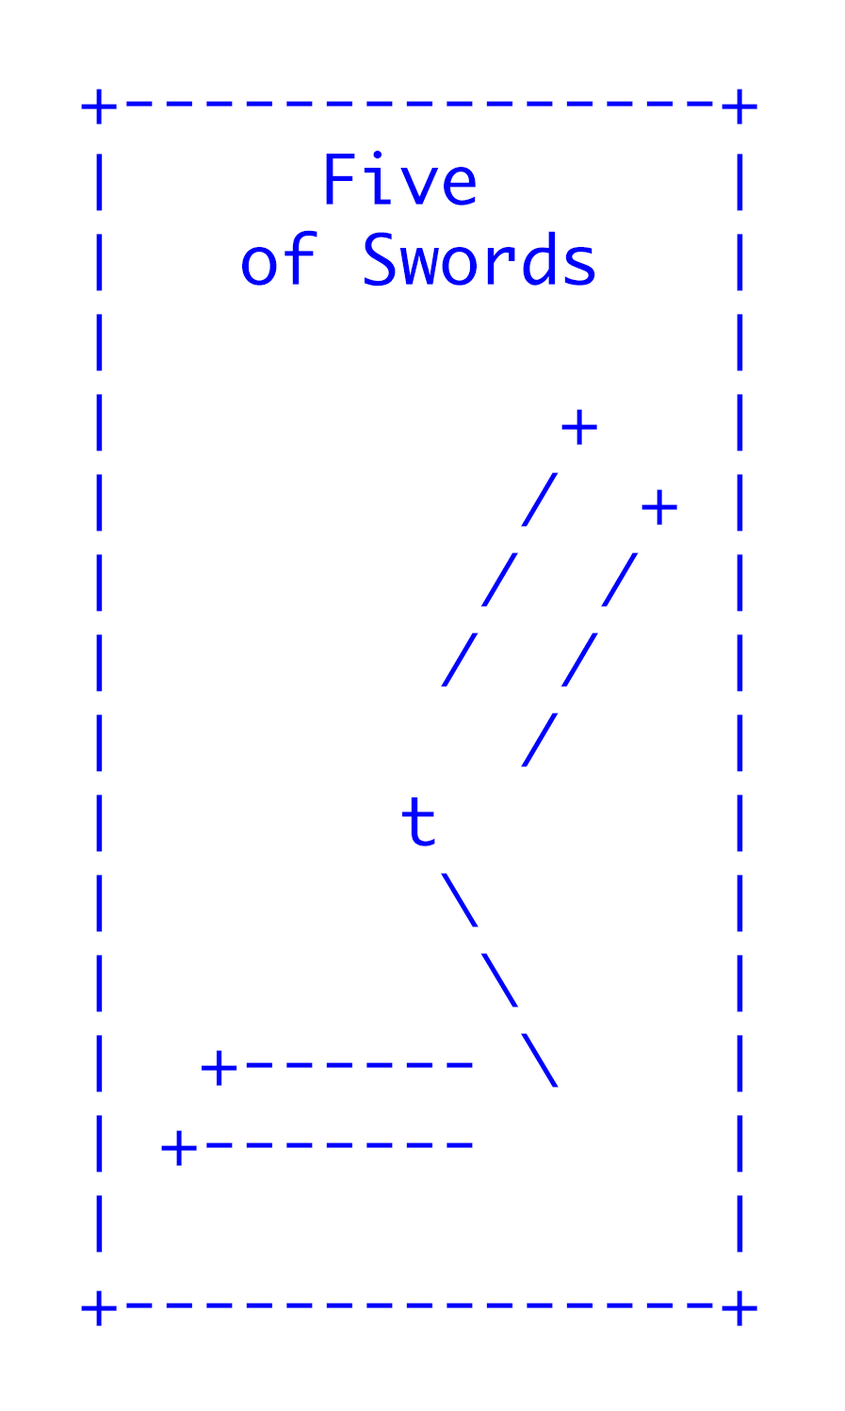
<style>
.page{position:relative;width:845px;height:1411px;background:#ffffff}
.page>*{position:absolute;margin:0}
.t1{font:66.7px "Monaco";color:#0000ff}
</style>
<div class="page">
<p class="t1" style="left:81px;top:89px;width:677px;height:1237px">+---------------+<br>│     Five      │<br>│   of Swords   │<br>│               │<br>│           +   │<br>│          /  + │<br>│         /  /  │<br>│        /  /   │ <br>│          /    │ <br>│       t       │<br>│        \      │ <br>│         \     │ <br>│  +------ \    │<br>│ +-------      │<br>│               │<br>+---------------+</p>
</div>
